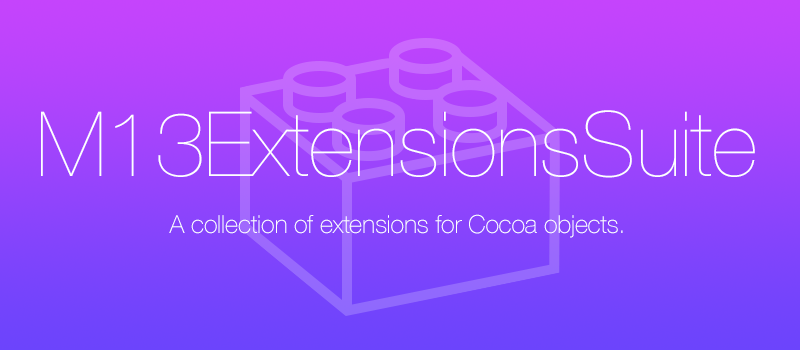
<style>
.page{position:relative;width:800px;height:350px}
.page>*{position:absolute;margin:0}
.t1{font:90px "HelveticaNeue-UltraLight";letter-spacing:-0.007em;color:#ffffff}
.t2{font:25px "HelveticaNeue-Thin";letter-spacing:-0.007em;color:#ffffff}
</style>
<div class="page">
<p class="t1" style="left:41px;top:110px;width:714px;height:68px">M13ExtensionsSuite</p>
<p class="t2" style="left:169px;top:214px;width:454px;height:24px">A collection of extensions for Cocoa objects.</p>
</div>
